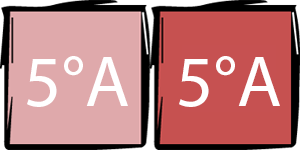
<style>
.page{position:relative;width:300px;height:150px;background:#dfa9ab}
.page>*{position:absolute;margin:0}
.t1{font:72.9px "MyriadHebrew-Regular";color:#ffffff}
</style>
<div class="page">
<p class="t1" style="left:27px;top:56px;width:101px;height:51px">5°A</p>
<p class="t1" style="left:179px;top:56px;width:101px;height:51px">5°A</p>
</div>
